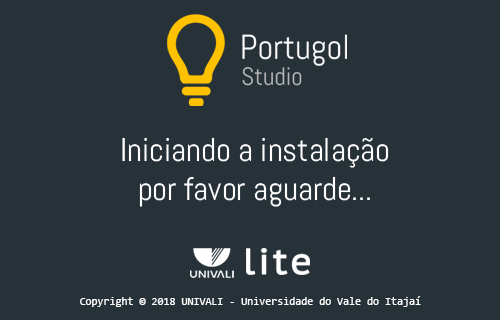
<style>
.page{position:relative;width:500px;height:320px;background:#263238}
.page>*{position:absolute;margin:0}
.t1{font:32.7px "Abel-Regular";color:#fefefe}
.t2{font:10.9px "Consolas";color:#fefefe}
</style>
<div class="page">
<p class="t1" style="left:122px;top:137px;width:267px;height:70px;text-align:center">Iniciando a instalação<br>por favor aguarde...</p>
<p class="t2" style="left:80px;top:296px;width:341px;height:11px">Copyright © 2018 UNIVALI - Universidade do Vale do Itajaí</p>
</div>
